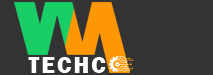
<style>
.page{position:relative;width:213px;height:75px;background:#333333}
.page>*{position:absolute;margin:0}
.t1{font:22.7px "FranklinGothic-Heavy";letter-spacing:0.1em;color:#ffffff;text-transform:uppercase}
</style>
<div class="page">
<p class="t1" style="left:28px;top:57px;width:78px;height:16px">techc</p>
</div>
